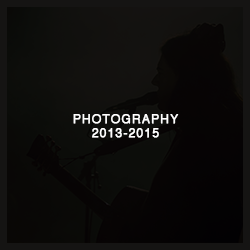
<style>
.page{position:relative;width:250px;height:250px}
.page>*{position:absolute;margin:0}
.t1{font:12px "Helvetica";letter-spacing:0.075em;color:#ffffff;text-transform:uppercase;font-weight:bold}
.t2{font:12px "Helvetica-Bold";letter-spacing:0.075em;color:#ffffff;text-transform:uppercase;font-weight:bold}
</style>
<div class="page">
<p class="t1" style="left:73px;top:114px;width:106px;height:24px"><span class="t2"><br><br><br><br></span>photography<br>2013-2015</p>
</div>
